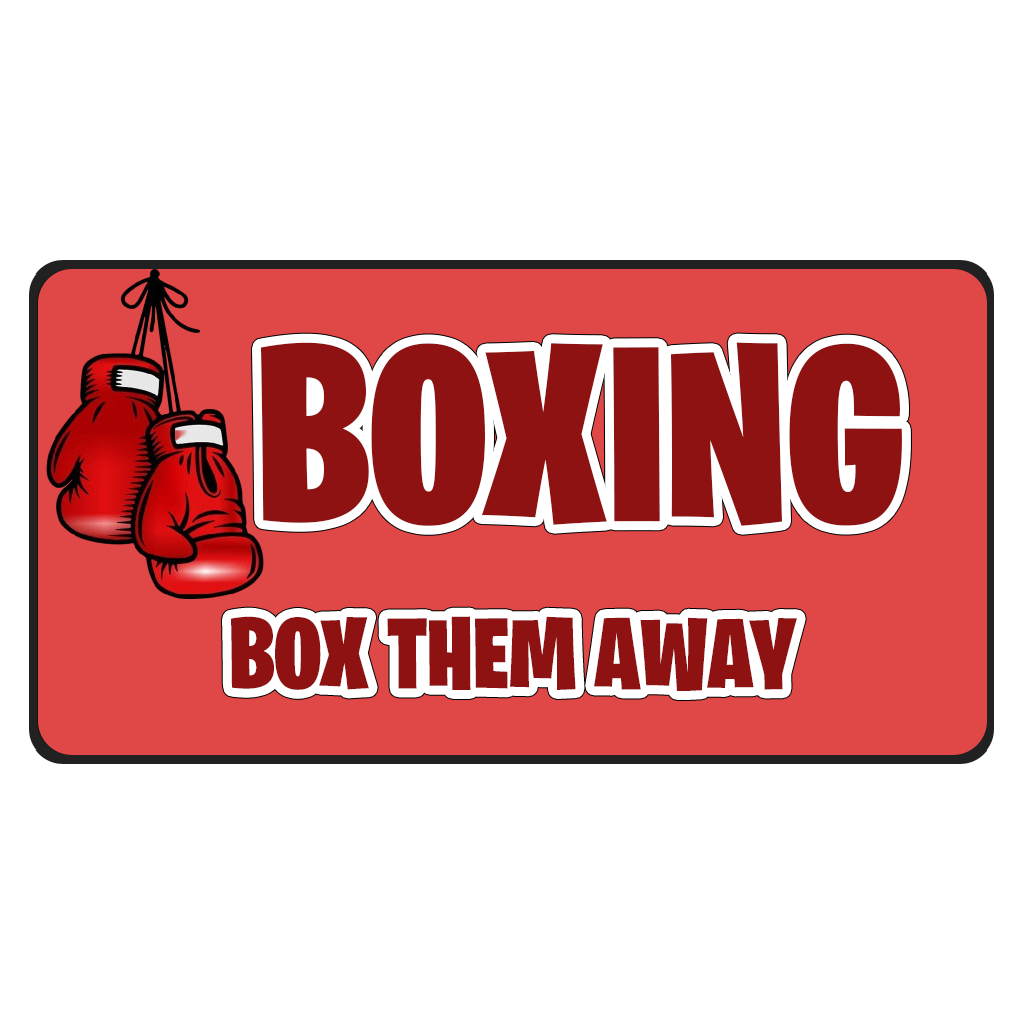
<style>
.page{position:relative;width:1024px;height:1024px;background:#ffffff}
.page>*{position:absolute;margin:0}
.t1{font:250px "BurbankBigCondensed-Black";color:#8f1212}
.t2{font:100px "BurbankBigCondensed-Black";color:#8f1212}
</style>
<div class="page">
<p class="t1" style="left:261px;top:342px;width:641px;height:184px">BOXING</p>
<p class="t2" style="left:231px;top:616px;width:566px;height:75px">BOX THEM AWAY</p>
</div>
